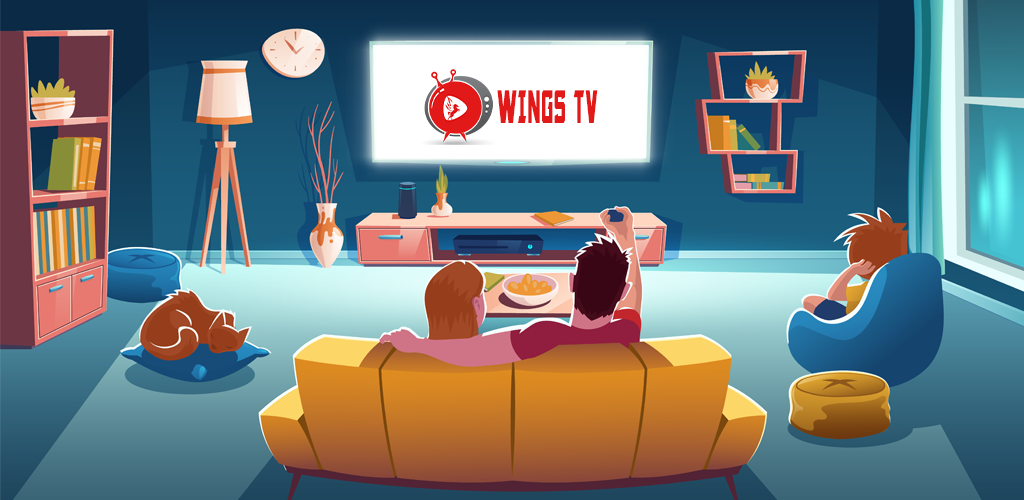
<style>
.page{position:relative;width:1024px;height:500px}
.page>*{position:absolute;margin:0}
.t1{font:47.6px "Armorhide";letter-spacing:-0.01em;color:#e11919;scale:0.5 1}
</style>
<div class="page">
<p class="t1" style="left:497px;top:90px;width:101px;height:33px">WINGS TV</p>
</div>
